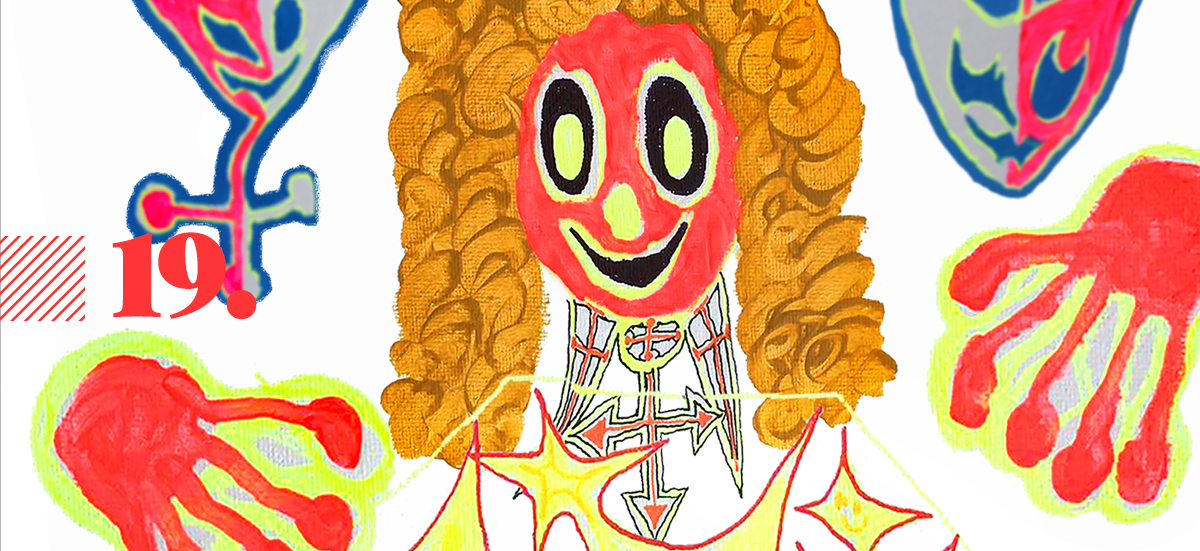
<style>
.page{position:relative;width:1200px;height:551px;background:#fdfdfd}
.page>*{position:absolute;margin:0}
.t1{font:120.6px "Vesterbro-Poster";letter-spacing:0.01em;color:#fe3537}
</style>
<div class="page">
<p class="t1" style="left:112px;top:232px;width:145px;height:88px">19.</p>
</div>
